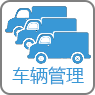
<style>
.page{position:relative;width:95px;height:95px;background:#ffffff}
.page>*{position:absolute;margin:0}
.t1{font:18px "MicrosoftYaHei";color:#3998d6}
</style>
<div class="page">
<p class="t1" style="left:12px;top:66px;width:72px;height:19px">车辆管理</p>
</div>
